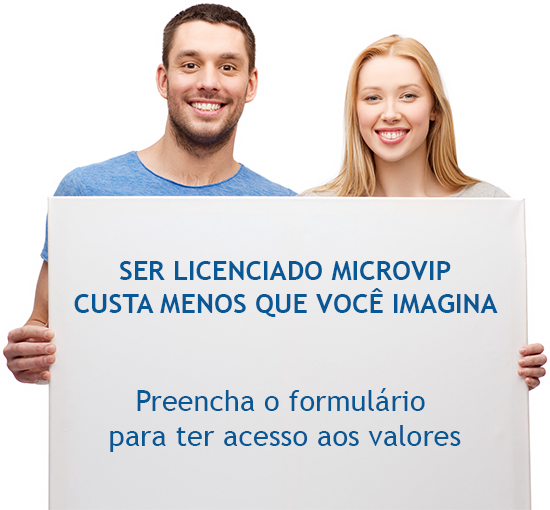
<style>
.page{position:relative;width:550px;height:510px;background:#ffffff}
.page>*{position:absolute;margin:0}
.t1{font:27.1px "TrebuchetMS-Bold";color:#085896}
.t2{font:29.2px "TrebuchetMS";color:#085896}
</style>
<div class="page">
<p class="t1" style="left:74px;top:261px;width:424px;height:56px;text-align:center">SER LICENCIADO MICROVIP<br>CUSTA MENOS QUE VOCÊ IMAGINA</p>
<p class="t2" style="left:110px;top:388px;width:351px;height:64px;text-align:center">Preencha o formulário <br>para ter acesso aos valores</p>
</div>
